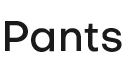
<style>
.page{position:relative;width:137px;height:71px;background:#ffffff}
.page>*{position:absolute;margin:0}
.t1{font:43px "Objectivity-Medium";color:#1a1a1a}
</style>
<div class="page">
<p class="t1" style="left:5px;top:21px;width:117px;height:31px">Pants</p>
</div>
